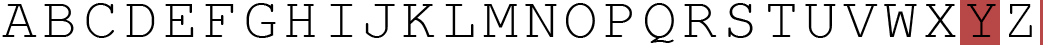
<style>
.page{position:relative;width:1043px;height:45px;background:#ffffff}
.page>*{position:absolute;margin:0}
.t1{font:58.4px "FreeMono";letter-spacing:0.1em;color:#000000}
</style>
<div class="page">
<p class="t1" style="left:2px;top:3px;width:153px;height:35px">ABCD</p>
<p class="t1" style="left:165px;top:4px;width:69px;height:33px">EF</p>
<p class="t1" style="left:246px;top:3px;width:107px;height:35px">GHI</p>
<p class="t1" style="left:365px;top:4px;width:192px;height:34px">JKLMN</p>
<p class="t1" style="left:566px;top:3px;width:66px;height:35px">OP</p>
<p class="t1" style="left:645px;top:3px;width:150px;height:40px">QRST</p>
<p class="t1" style="left:805px;top:4px;width:73px;height:34px">UV</p>
<p class="t1" style="left:884px;top:4px;width:112px;height:33px">WXY</p>
<p class="t1" style="left:1009px;top:4px;width:23px;height:33px">Z</p>
</div>
